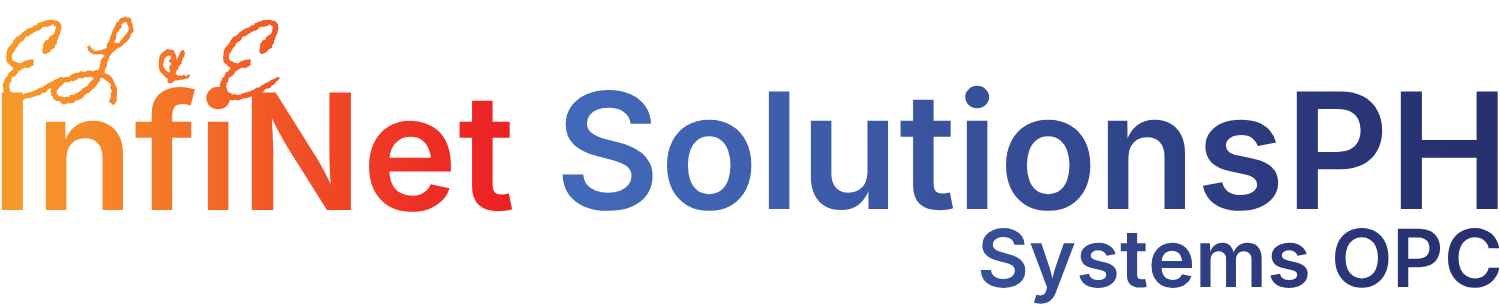
<style>
.page{position:relative;width:1500px;height:305px;background:#ffffff}
.page>*{position:absolute;margin:0}
.t1{font:83px "HomemadeApple-Regular";color:#f58528}
.t2{font:161.6px "Inter-SemiBold"}
.t3{font:80px "Inter-SemiBold";color:#2d3d81}
</style>
<div class="page">
<p class="t1" style="left:2px;top:16px;width:278px;height:90px">EL &amp; E</p>
<p class="t2" style="left:1px;top:86px;width:512px;height:126px">InfiNet</p>
<p class="t2" style="left:562px;top:85px;width:936px;height:126px">SolutionsPH</p>
<p class="t3" style="left:980px;top:228px;width:520px;height:76px">Systems OPC</p>
</div>
